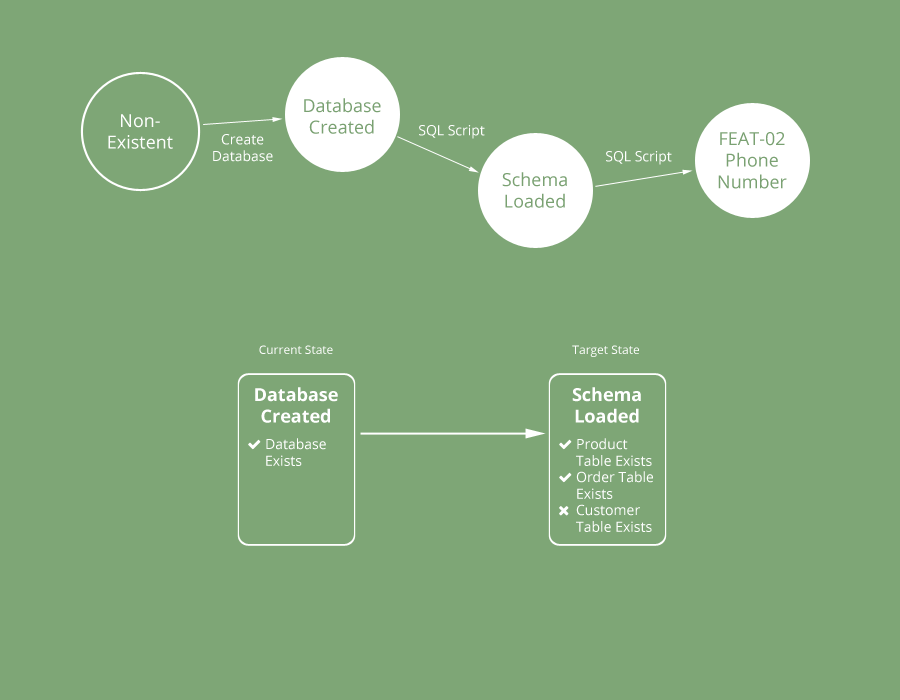
<style>
.page{position:relative;width:900px;height:700px;background:#7ea676}
.page>*{position:absolute;margin:0}
.t1{font:18px "OpenSans";color:#7aa172}
.t2{font:18px "OpenSans";color:#ffffff}
.t3{font:14px "OpenSans";color:#ffffff}
.t4{font:12px "OpenSans";color:#ffffff}
.t5{font:18px "OpenSans-Bold";color:#ffffff}
</style>
<div class="page">
<p class="t1" style="left:304px;top:98px;width:77px;height:36px;text-align:center">Database<br>Created</p>
<p class="t2" style="left:108px;top:114px;width:65px;height:35px;text-align:center">Non-<br>Existent</p>
<p class="t3" style="left:419px;top:125px;width:66px;height:14px">SQL Script</p>
<p class="t3" style="left:213px;top:134px;width:60px;height:28px;text-align:center">Create<br>Database</p>
<p class="t1" style="left:718px;top:132px;width:69px;height:57px;text-align:center">FEAT-02<br>Phone<br>Number</p>
<p class="t3" style="left:606px;top:151px;width:66px;height:14px">SQL Script</p>
<p class="t1" style="left:502px;top:172px;width:65px;height:36px;text-align:center">Schema<br>Loaded</p>
<p class="t4" style="left:259px;top:345px;width:74px;height:9px">Current State</p>
<p class="t4" style="left:572px;top:345px;width:67px;height:12px">Target State</p>
<p class="t5" style="left:255px;top:387px;width:83px;height:36px;text-align:center">Database<br>Created</p>
<p class="t5" style="left:572px;top:387px;width:69px;height:36px;text-align:center">Schema<br>Loaded</p>
<p class="t3" style="left:266px;top:438px;width:60px;height:28px">Database<br>Exists</p>
<p class="t3" style="left:576px;top:438px;width:76px;height:28px">Product<br>Table Exists</p>
<p class="t3" style="left:576px;top:471px;width:77px;height:28px">Order Table<br>Exists</p>
<p class="t3" style="left:576px;top:504px;width:76px;height:28px">Customer<br>Table Exists</p>
</div>
